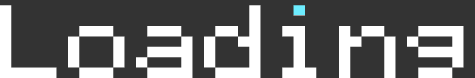
<style>
.page{position:relative;width:475px;height:78px;background:#333333}
.page>*{position:absolute;margin:0}
.t1{font:83.2px "Graph-35+-pix";color:#ffffff;scale:1.09 1}
</style>
<div class="page">
<p class="t1" style="left:0px;top:5px;width:464px;height:73px">Loading</p>
</div>
